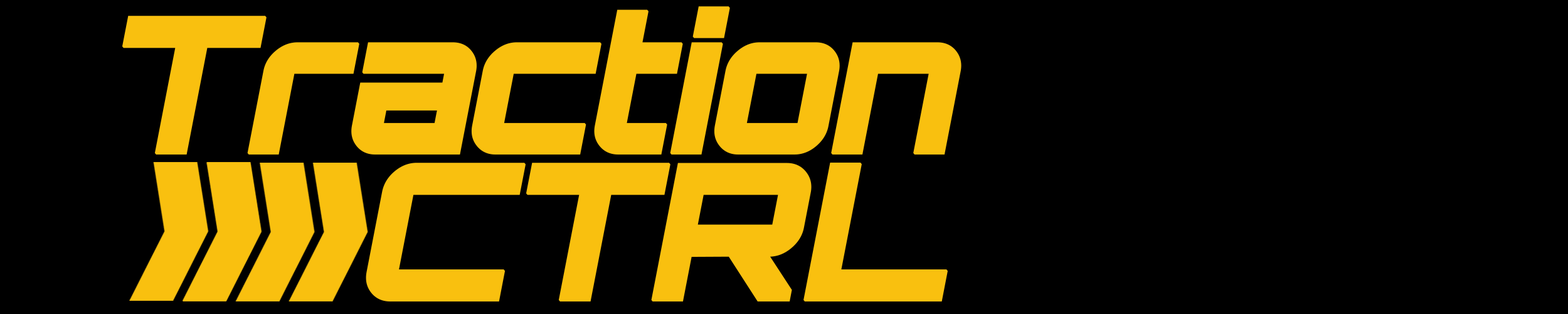
<style>
.page{position:relative;width:1568px;height:314px;background:#000000}
.page>*{position:absolute;margin:0}
.t1{font:188.6px "Orbitron-Black";letter-spacing:-0.05em;color:#f9c00f;font-weight:bold;font-style:italic}
</style>
<div class="page">
<p class="t1" style="left:122px;top:6px;width:839px;height:149px">Traction</p>
<p class="t1" style="left:366px;top:162px;width:582px;height:140px">CTRL</p>
</div>
